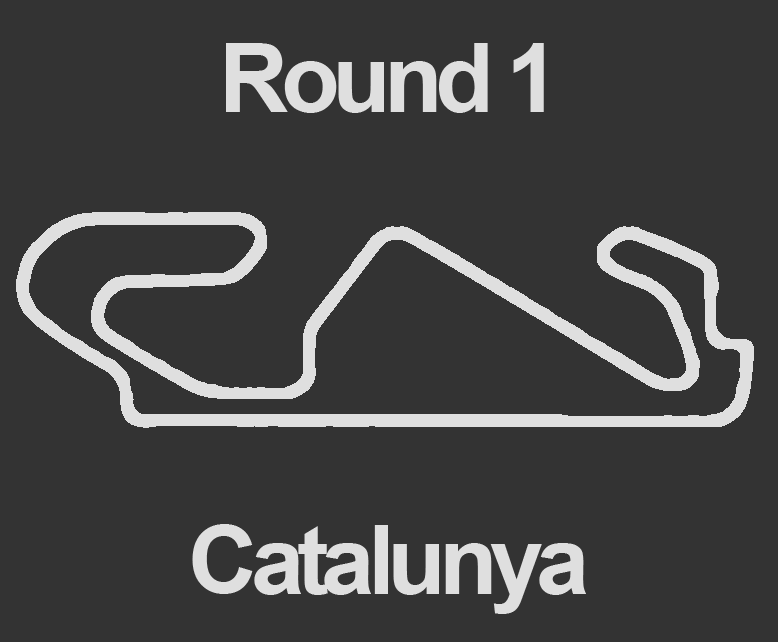
<style>
.page{position:relative;width:778px;height:642px;background:#333333}
.page>*{position:absolute;margin:0}
.t1{font:96px "Arial-BoldMT";letter-spacing:-0.075em;color:#dfdfdf}
</style>
<div class="page">
<p class="t1" style="left:226px;top:43px;width:318px;height:70px">Round 1</p>
<p class="t1" style="left:192px;top:524px;width:394px;height:90px">Catalunya</p>
</div>
